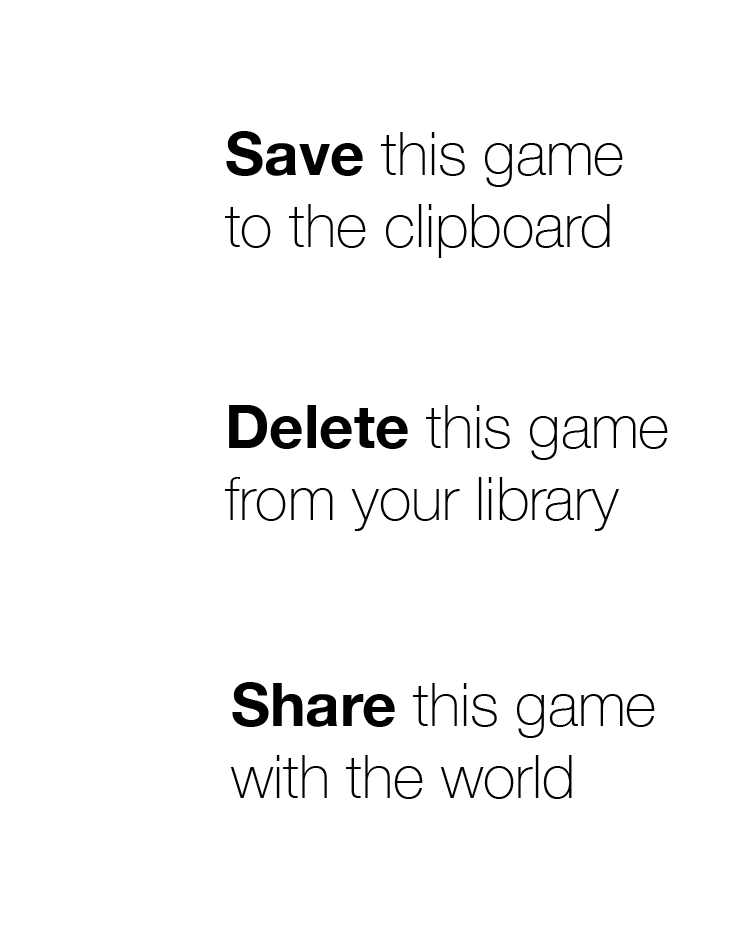
<style>
.page{position:relative;width:750px;height:952px;background:#ffffff}
.page>*{position:absolute;margin:0}
.t1{font:60px "HelveticaNeue-Thin";color:#000000}
.t2{font:60px "HelveticaNeue-Bold";color:#000000}
</style>
<div class="page">
<p class="t1" style="left:225px;top:131px;width:398px;height:127px"><span class="t2">Save</span> this game<br>to the clipboard</p>
<p class="t1" style="left:225px;top:405px;width:443px;height:126px"><span class="t2">Delete </span>this game<br>from your library</p>
<p class="t1" style="left:230px;top:682px;width:425px;height:117px"><span class="t2">Share</span> this game<br>with the world</p>
</div>
